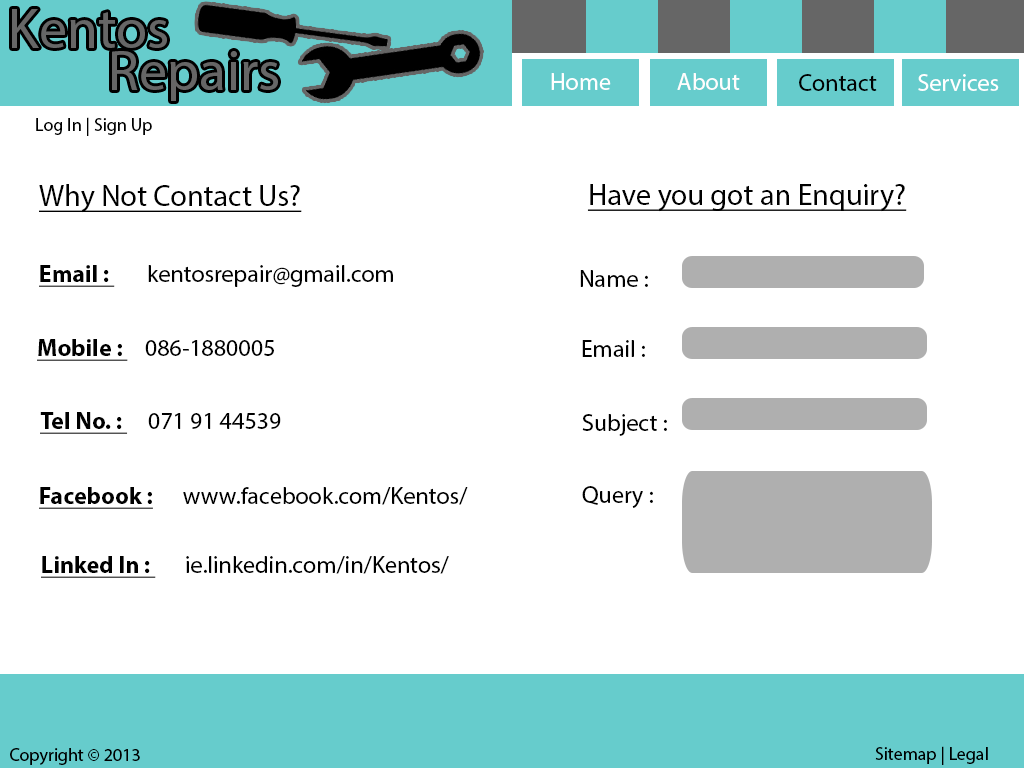
<style>
.page{position:relative;width:1024px;height:768px;background:#ffffff}
.page>*{position:absolute;margin:0}
.t1{font:24px "MyriadPro-Regular";color:#ffffff}
.t2{font:24px "MyriadPro-Regular";color:#fffdfd}
.t3{font:24px "MyriadPro-Regular";color:#010101}
.t4{font:18px "MyriadPro-Regular";color:#000000}
.t5{font:30px "MyriadPro-Regular";color:#000000;text-decoration:underline}
.t6{font:24px "MyriadPro-Regular";color:#000000}
.t7{font:24px "MyriadPro-Bold";color:#000000;text-decoration:underline}
</style>
<div class="page">
<p class="t1" style="left:551px;top:73px;width:60px;height:17px">Home</p>
<p class="t2" style="left:677px;top:73px;width:63px;height:17px">About</p>
<p class="t3" style="left:799px;top:74px;width:78px;height:17px">Contact</p>
<p class="t1" style="left:918px;top:74px;width:81px;height:17px">Services</p>
<p class="t4" style="left:36px;top:117px;width:116px;height:19px">Log In | Sign Up</p>
<p class="t5" style="left:39px;top:184px;width:263px;height:29px">Why Not Contact Us?</p>
<p class="t5" style="left:587px;top:184px;width:320px;height:28px">Have you got an Enquiry?</p>
<p class="t6" style="left:39px;top:265px;width:354px;height:22px"><span class="t7">Email :  </span>kentosrepair@gmail.com</p>
<p class="t6" style="left:580px;top:270px;width:68px;height:17px">Name :</p>
<p class="t6" style="left:37px;top:339px;width:237px;height:22px"><span class="t7">Mobile :  </span>086-1880005</p>
<p class="t6" style="left:582px;top:340px;width:63px;height:17px">Email :</p>
<p class="t6" style="left:40px;top:412px;width:241px;height:22px"><span class="t7">Tel No. :  </span>071 91 44539</p>
<p class="t6" style="left:582px;top:414px;width:85px;height:22px">Subject :</p>
<p class="t6" style="left:582px;top:486px;width:71px;height:22px">Query :</p>
<p class="t6" style="left:39px;top:487px;width:429px;height:22px"><span class="t7">Facebook :</span>  www.facebook.com/Kentos/</p>
<p class="t6" style="left:41px;top:556px;width:408px;height:22px"><span class="t7">Linked In : </span> ie.linkedin.com/in/Kentos/</p>
<p class="t4" style="left:10px;top:748px;width:130px;height:17px">Copyright © 2013</p>
<p class="t4" style="left:875px;top:746px;width:113px;height:19px">Sitemap | Legal</p>
</div>
